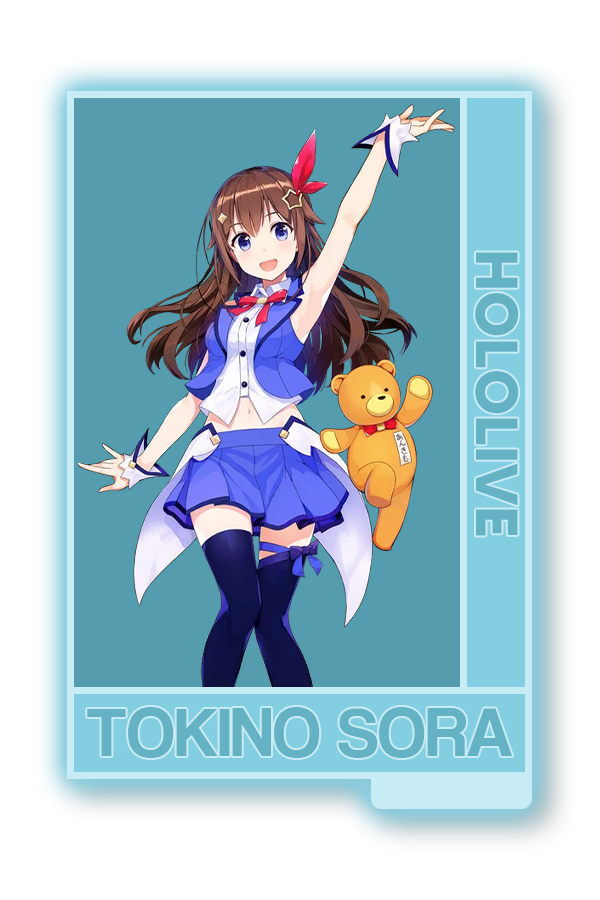
<style>
.page{position:relative;width:600px;height:900px;background:#549cae}
.page>*{position:absolute;margin:0}
.t1{font:59.2px "MADETOMMY-Bold";color:#66b2c5}
.t2{font:71.2px "CoolveticaRg-Regular";color:#66b2c5}
</style>
<div class="page">
<p class="t1" style="left:475px;top:252px;width:44px;height:284px;rotate:90deg">HOLOLIVE</p>
<p class="t2" style="left:87px;top:707px;width:426px;height:51px">TOKINO SORA</p>
</div>
